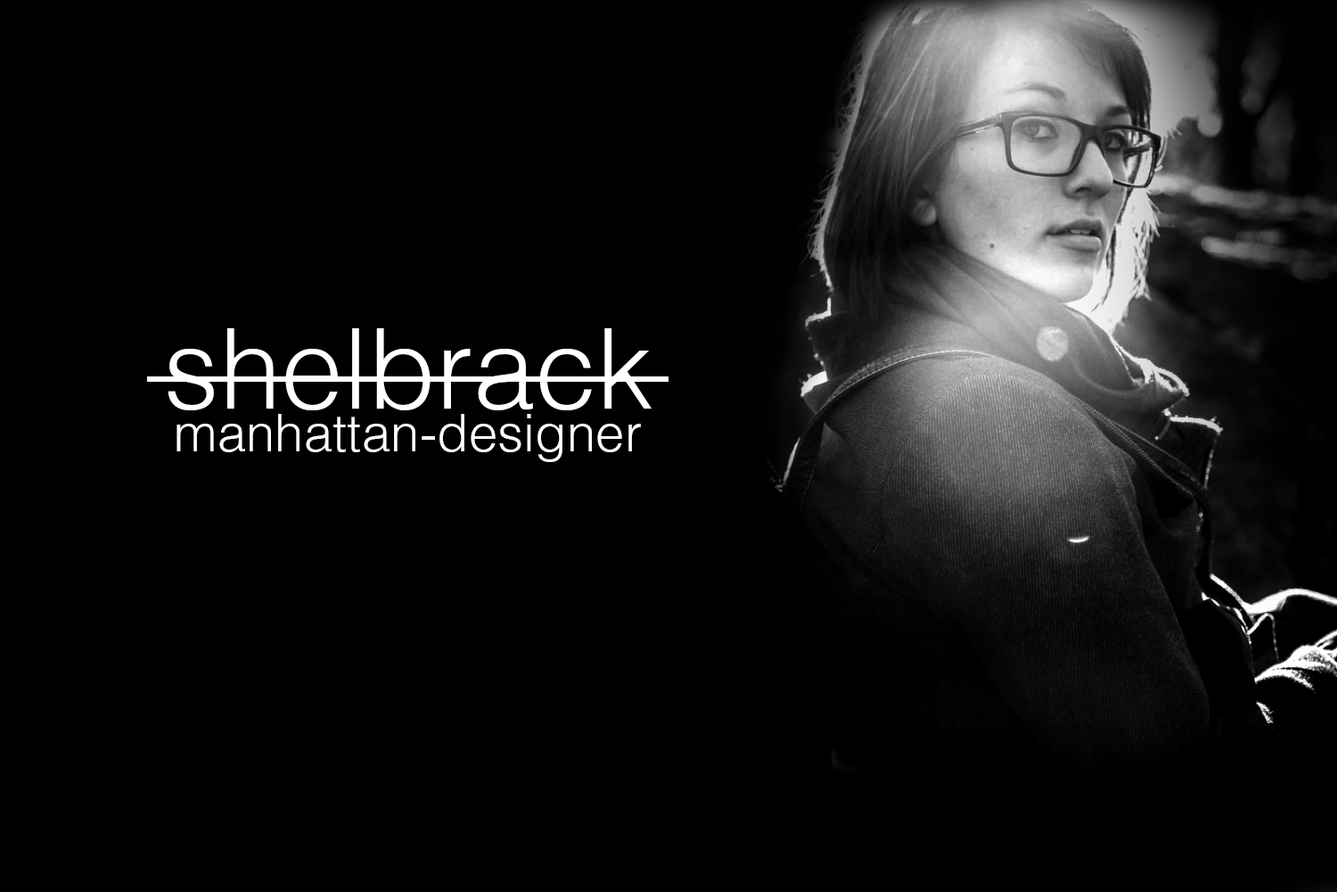
<style>
.page{position:relative;width:1337px;height:892px;background:#000000}
.page>*{position:absolute;margin:0}
.t1{font:111.5px "Helvetica-Light";color:#ffffff}
.t2{font:52px "Helvetica-Light";color:#ffffff}
</style>
<div class="page">
<p class="t1" style="left:168px;top:328px;width:484px;height:82px">shelbrack</p>
<p class="t2" style="left:177px;top:414px;width:464px;height:48px">manhattan-designer</p>
</div>
